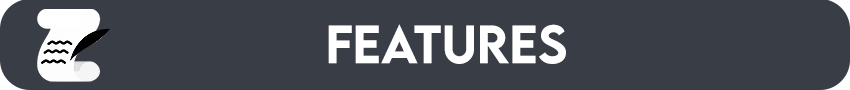
<style>
.page{position:relative;width:850px;height:90px;background:#393e46}
.page>*{position:absolute;margin:0}
.t1{font:48px "LEMONMILK-Medium";color:#ffffff}
</style>
<div class="page">
<p class="t1" style="left:328px;top:24px;width:238px;height:40px">Features</p>
</div>
